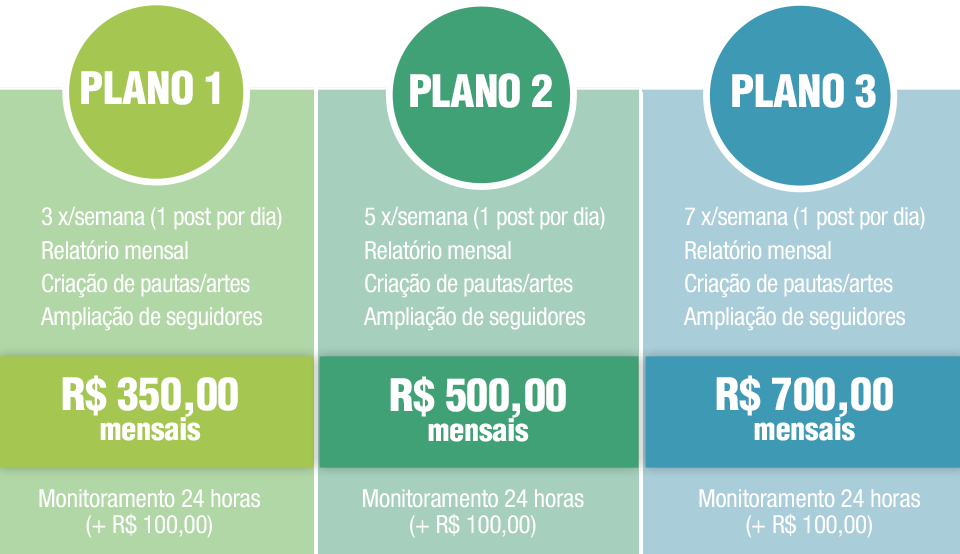
<style>
.page{position:relative;width:960px;height:554px}
.page>*{position:absolute;margin:0}
.t1{font:43.8px "Helvetica-CondensedBlack";letter-spacing:-0.01em;color:#ffffff}
.t2{font:43.8px "Helvetica-CondensedBlack";letter-spacing:-0.02em;color:#ffffff}
.t3{font:25px/33.3px "Helvetica57-Condensed";letter-spacing:-0.02em;color:#ffffff}
.t4{font:43.8px/30.3px "Helvetica-CondensedBlack";letter-spacing:-0.01em;color:#ffffff}
.t5{font:30.3px/30.3px "Helvetica-CondensedBlack";letter-spacing:-0.01em;color:#ffffff}
.t6{font:25px/27px "Helvetica57-Condensed";letter-spacing:-0.01em;color:#ffffff}
</style>
<div class="page">
<p class="t1" style="left:81px;top:70px;width:139px;height:35px">PLANO 1</p>
<p class="t2" style="left:410px;top:73px;width:142px;height:35px">PLANO 2</p>
<p class="t1" style="left:732px;top:73px;width:144px;height:35px">PLANO 3</p>
<p class="t3" style="left:40px;top:206px;width:242px;height:125px">3 x/semana (1 post por dia)<br>Relatório mensal<br>Criação de pautas/artes<br>Ampliação de seguidores</p>
<p class="t3" style="left:363px;top:206px;width:242px;height:125px">5 x/semana (1 post por dia)<br>Relatório mensal<br>Criação de pautas/artes<br>Ampliação de seguidores</p>
<p class="t3" style="left:683px;top:206px;width:242px;height:125px">7 x/semana (1 post por dia)<br>Relatório mensal<br>Criação de pautas/artes<br>Ampliação de seguidores</p>
<p class="t4" style="left:62px;top:375px;width:176px;height:66px;text-align:center">R$ 350,00<br><span class="t5">mensais</span></p>
<p class="t4" style="left:390px;top:376px;width:176px;height:66px;text-align:center">R$ 500,00<br><span class="t5">mensais</span></p>
<p class="t4" style="left:716px;top:375px;width:177px;height:66px;text-align:center">R$ 700,00<br><span class="t5">mensais</span></p>
<p class="t6" style="left:39px;top:489px;width:221px;height:49px;text-align:center">Monitoramento 24 horas<br>(+ R$ 100,00)</p>
<p class="t6" style="left:363px;top:489px;width:221px;height:49px;text-align:center">Monitoramento 24 horas<br>(+ R$ 100,00)</p>
<p class="t6" style="left:699px;top:489px;width:221px;height:49px;text-align:center">Monitoramento 24 horas<br>(+ R$ 100,00)</p>
</div>
